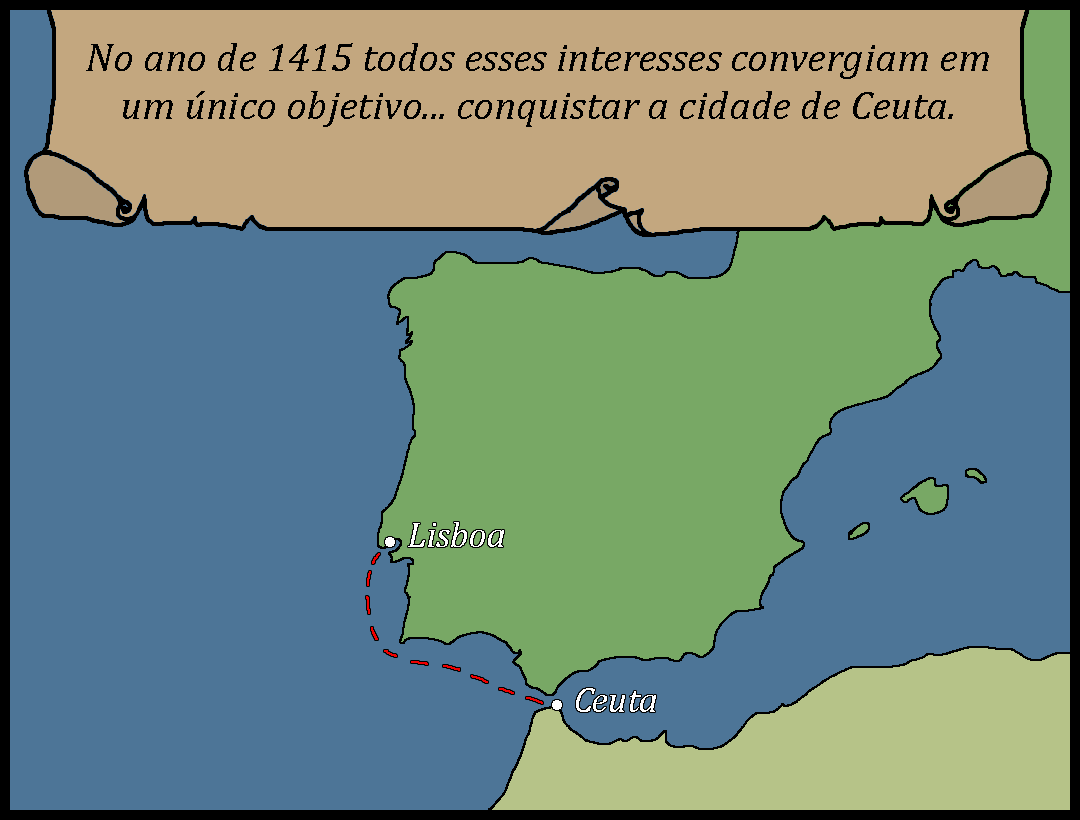
<style>
.page{position:relative;width:1080px;height:820px;background:#4d7597}
.page>*{position:absolute;margin:0}
.t1{font:40px "Cambria-Italic";color:#000000;scale:1.03 1}
.t2{font:36px "Cambria-Italic";color:#ffffff}
</style>
<div class="page">
<p class="t1" style="left:86px;top:43px;width:903px;height:84px;text-align:center">No ano de 1415 todos esses interesses convergiam em um único objetivo... conquistar a cidade de Ceuta.</p>
<p class="t2" style="left:408px;top:522px;width:96px;height:25px">Lisboa</p>
<p class="t2" style="left:576px;top:688px;width:80px;height:24px">Ceuta</p>
</div>
